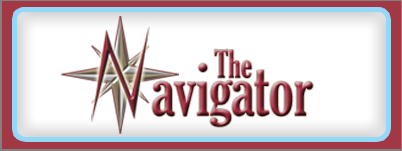
<style>
.page{position:relative;width:402px;height:151px;background:#ffffff}
.page>*{position:absolute;margin:0}
.t1{font:36.5px "GloucesterMT-ExtraCondensed"}
.t2{font:72.9px "GloucesterMT-ExtraCondensed"}
</style>
<div class="page">
<p class="t1" style="left:214px;top:49px;width:38px;height:29px">The</p>
<p class="t2" style="left:152px;top:63px;width:161px;height:64px">avigator</p>
</div>
